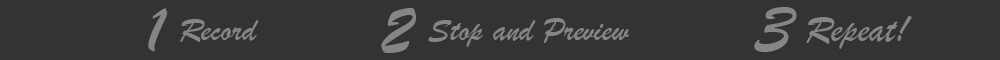
<style>
.page{position:relative;width:1000px;height:60px;background:#333333}
.page>*{position:absolute;margin:0}
.t1{font:70.2px "BrushScriptMT";color:#858585}
.t2{font:71.6px "BrushScriptMT";color:#858585}
.t3{font:73.6px "BrushScriptMT";color:#858585}
.t4{font:39.2px "BrushScriptMT";color:#858585}
.t5{font:34px "BrushScriptMT";color:#858585}
</style>
<div class="page">
<p class="t1" style="left:148px;top:8px;width:20px;height:44px">1</p>
<p class="t2" style="left:381px;top:8px;width:35px;height:45px">2</p>
<p class="t3" style="left:754px;top:7px;width:43px;height:45px">3</p>
<p class="t4" style="left:806px;top:16px;width:106px;height:33px">Repeat!</p>
<p class="t5" style="left:180px;top:19px;width:79px;height:23px">Record</p>
<p class="t5" style="left:428px;top:18px;width:202px;height:29px">Stop and Preview</p>
</div>
